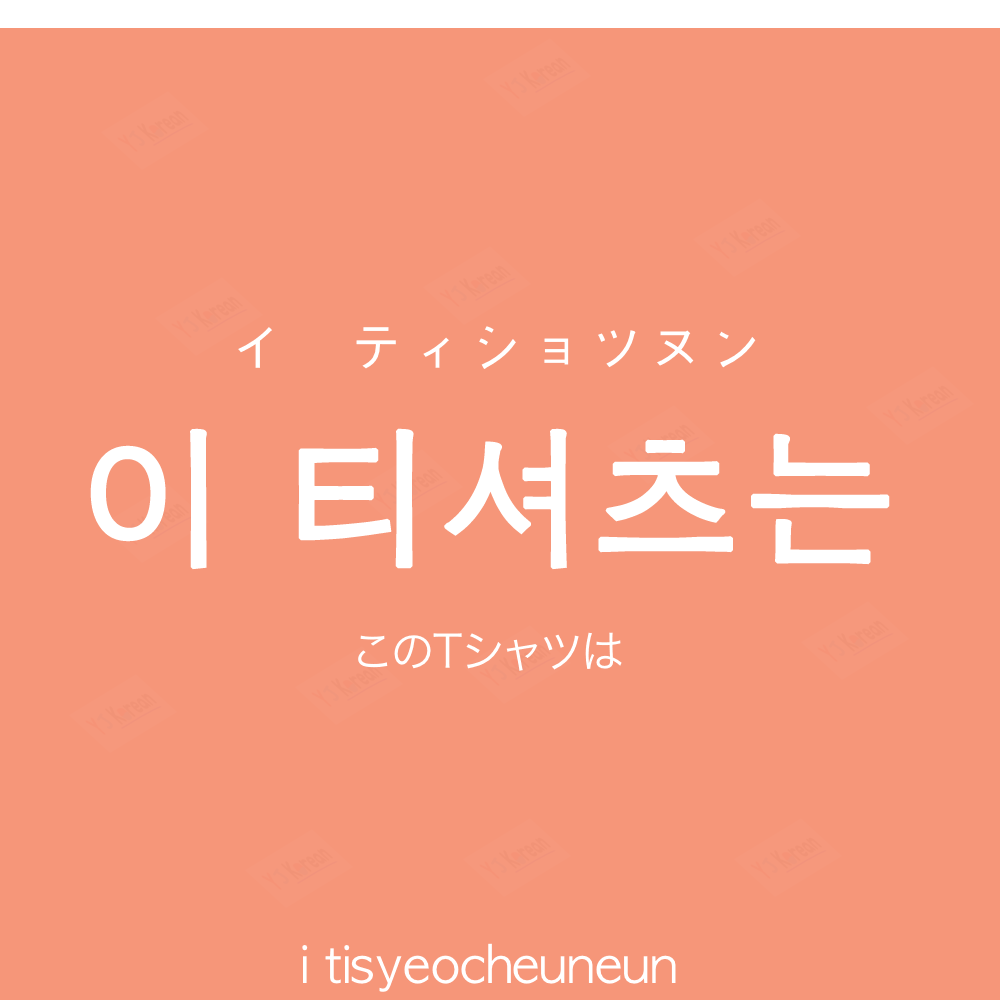
<style>
.page{position:relative;width:1000px;height:1000px;background:#f69679}
.page>*{position:absolute;margin:0}
.t1{font:60px "AppleGothic";color:#ffffff}
.t2{font:150px "AppleGothic";color:#ffffff;font-weight:bold}
.t3{font:45px "HiraKakuProN-W3";color:#ffffff}
.t4{font:50px "AppleGothic";color:#ffffff}
</style>
<div class="page">
<p class="t1" style="left:238px;top:326px;width:518px;height:43px">イ　ティショツヌン</p>
<p class="t2" style="left:90px;top:428px;width:800px;height:142px">이 티셔츠는</p>
<p class="t3" style="left:358px;top:632px;width:264px;height:39px">このTシャツは</p>
<p class="t4" style="left:302px;top:943px;width:374px;height:49px">i tisyeocheuneun</p>
</div>
